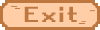
<style>
.page{position:relative;width:100px;height:30px;background:#ffcea6}
.page>*{position:absolute;margin:0}
.t1{font:20.8px "RetroGaming";letter-spacing:0.06em;color:#be783f}
</style>
<div class="page">
<p class="t1" style="left:24px;top:6px;width:53px;height:16px">Exit</p>
</div>
